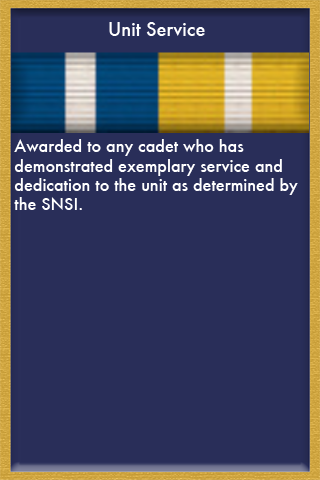
<style>
.page{position:relative;width:320px;height:480px;background:#292e59}
.page>*{position:absolute;margin:0}
.t1{font:18px "Futura-Medium";color:#ffffff}
.t2{font:16px "Futura-Medium";color:#ffffff}
</style>
<div class="page">
<p class="t1" style="left:109px;top:22px;width:96px;height:14px">Unit Service</p>
<p class="t2" style="left:14px;top:139px;width:284px;height:71px">Awarded to any cadet who has <br>demonstrated exemplary service and <br>dedication to the unit as determined by <br>the SNSI.</p>
</div>
